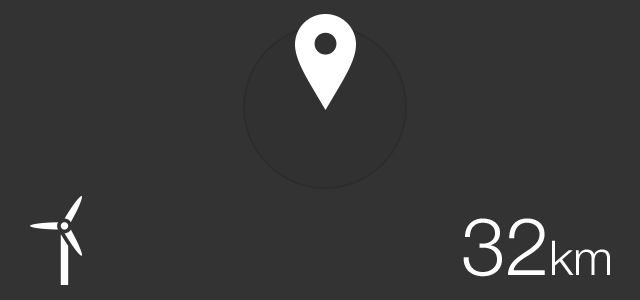
<style>
.page{position:relative;width:640px;height:300px;background:#333333}
.page>*{position:absolute;margin:0}
.t1{font:80px "HelveticaNeue-Light";color:#ffffff}
.t2{font:48px "HelveticaNeue-Light";color:#ffffff}
</style>
<div class="page">
<p class="t1" style="left:463px;top:218px;width:147px;height:59px">32<span class="t2">km</span></p>
</div>
